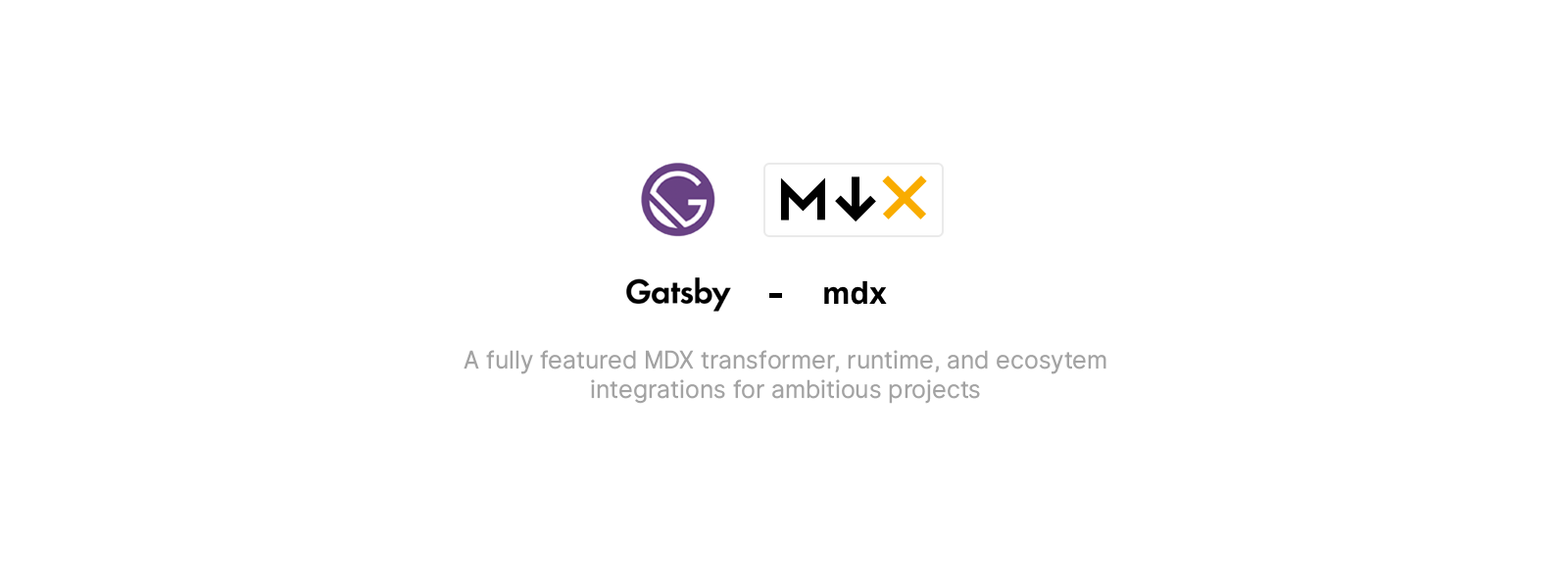
<style>
.page{position:relative;width:1568px;height:588px;background:#ffffff}
.page>*{position:absolute;margin:0}
.t1{font:24.5px "InterUI-Regular";color:#a3a3a3}
</style>
<div class="page">
<p class="t1" style="left:464px;top:350px;width:642px;height:54px;text-align:center">A fully featured MDX transformer, runtime, and ecosytem integrations for ambitious projects</p>
</div>
